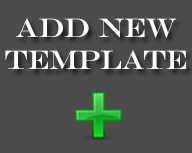
<style>
.page{position:relative;width:192px;height:153px;background:#4b4b4b}
.page>*{position:absolute;margin:0}
.t1{font:26.8px "EngraversMT";letter-spacing:-0.01em;color:#ffffff;text-transform:uppercase}
</style>
<div class="page">
<p class="t1" style="left:5px;top:18px;width:181px;height:51px;text-align:center">Add New<br>Template</p>
</div>
